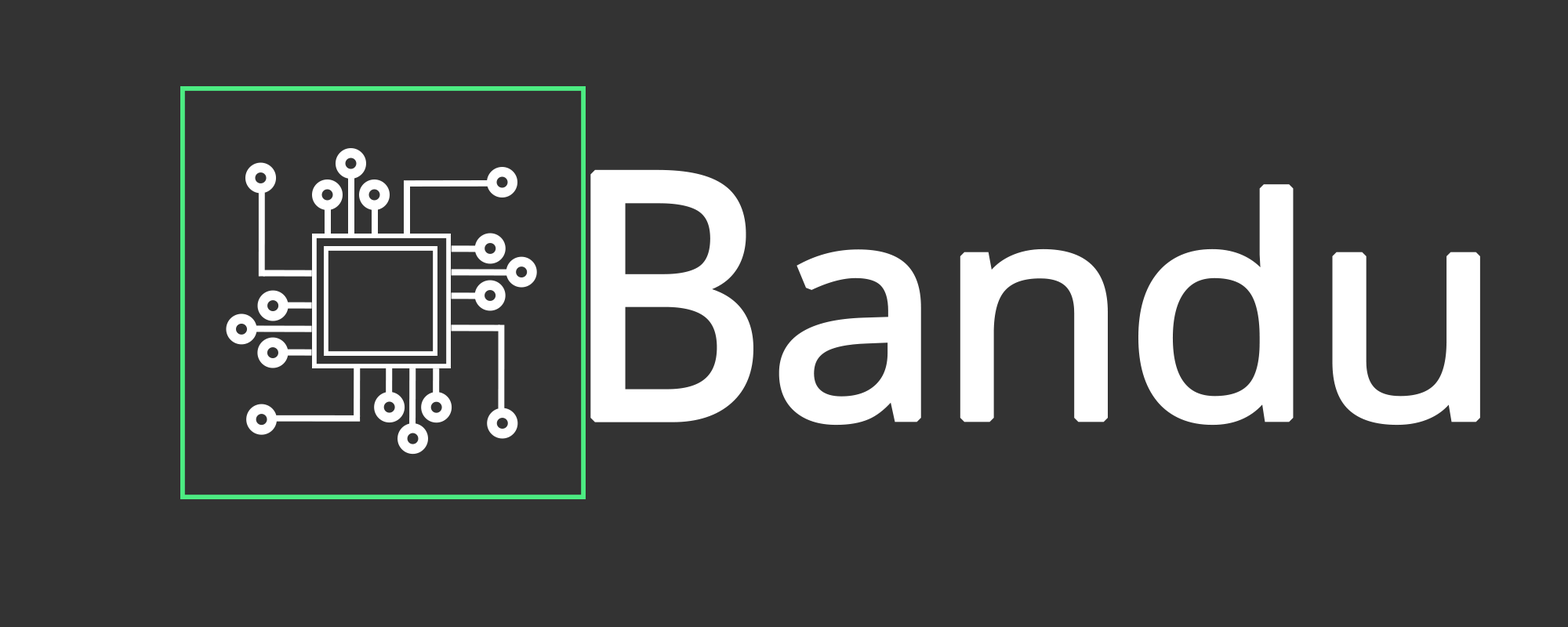
<style>
.page{position:relative;width:1568px;height:627px;background:#333333}
.page>*{position:absolute;margin:0}
.t1{font:301.8px "OpenSansHebrew-Regular";letter-spacing:-0.04em;color:#ffffff;font-weight:bold;scale:1.03 1}
.t2{font:340.7px "OpenSansHebrew-Regular";letter-spacing:-0.02em;color:#ffffff;font-weight:bold;scale:0.91 1}
</style>
<div class="page">
<p class="t1" style="left:590px;top:169px;width:890px;height:257px"><span class="t2">B</span>andu</p>
</div>
